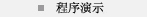
<style>
.page{position:relative;width:147px;height:17px;background:#f1f1f1}
.page>*{position:absolute;margin:0}
.t1{font:12px "SimSun";color:#000000;font-weight:bold}
</style>
<div class="page">
<p class="t1" style="left:56px;top:2px;width:48px;height:12px">程序演示</p>
</div>
